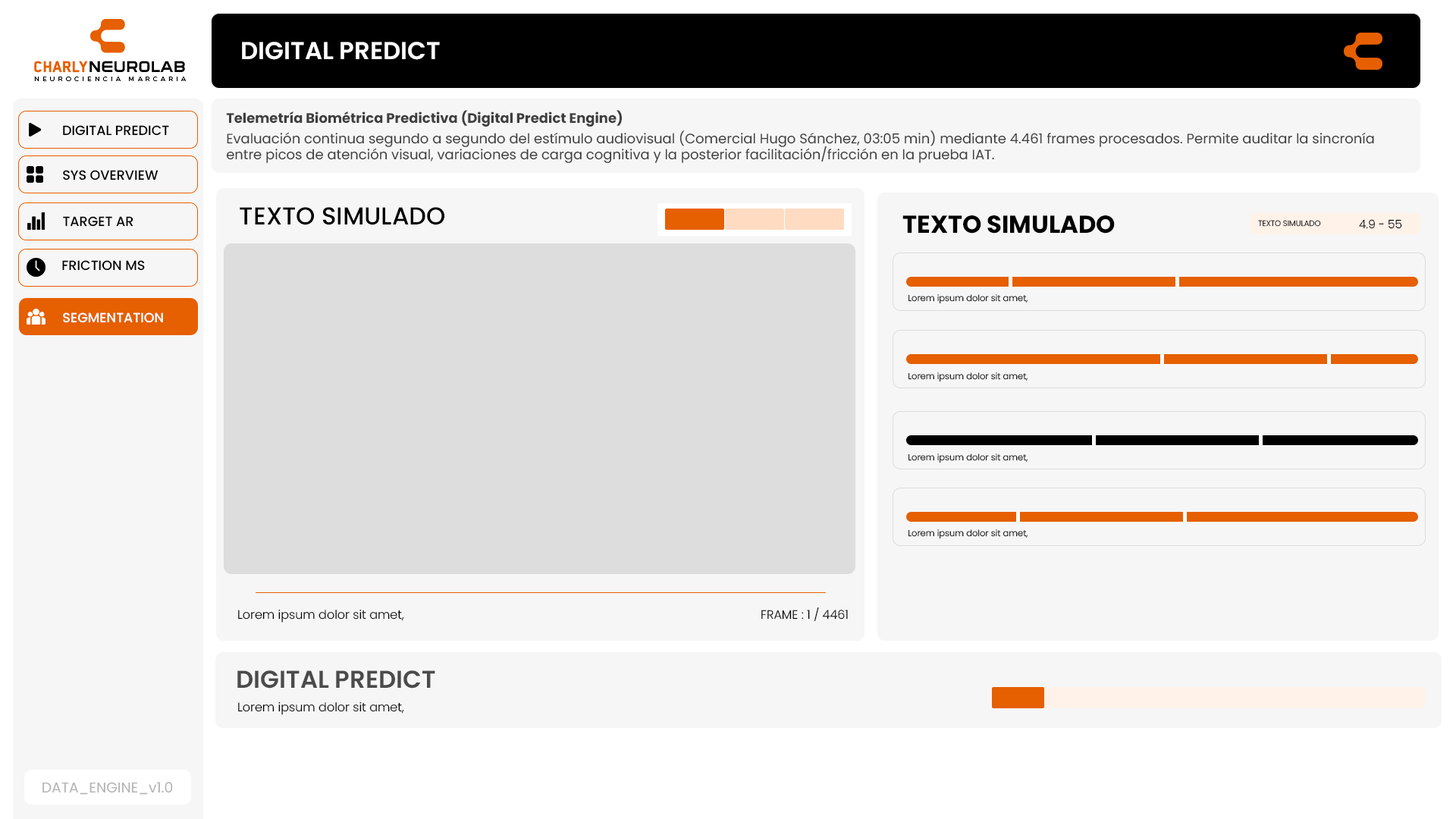
<style>
.page{position:relative;width:1456px;height:819px;background:#f6f6f6}
.page>*{position:absolute;margin:0}
.t1{font:24.5px "Poppins-SemiBold";color:#ffffff}
.t2{font:13.6px "Poppins-Regular";color:#3f3f3f}
.t3{font:13.6px "Poppins-Bold";color:#3f3f3f}
.t4{font:13.3px "Poppins-Medium";color:#000000}
.t5{font:24.5px "Poppins-Medium";color:#000000}
.t6{font:24.5px "Poppins-Bold";color:#000000}
.t7{font:7.7px "Poppins-Light"}
.t8{font:11.6px "Poppins-Light";color:#000000}
.t9{font:8.7px "Poppins-Light";color:#000000}
.t10{font:13.3px "Poppins-Medium";color:#ffffff}
.t11{font:12.1px "Poppins-Light";color:#000000}
.t12{font:24.5px "Poppins-SemiBold";color:#4b4b4b}
.t13{font:14.2px "Poppins-Regular";color:#b4b4b4}
</style>
<div class="page">
<p class="t1" style="left:242px;top:42px;width:198px;height:18px">DIGITAL PREDICT</p>
<p class="t2" style="left:226px;top:110px;width:1148px;height:53px"><span class="t3">Telemetría Biométrica Predictiva (Digital Predict Engine)<br></span>Evaluación continua segundo a segundo del estímulo audiovisual (Comercial Hugo Sánchez, 03:05 min) mediante 4.461 frames procesados. Permite auditar la sincronía entre picos de atención visual, variaciones de carga cognitiva y la posterior facilitación/fricción en la prueba IAT.</p>
<p class="t4" style="left:63px;top:125px;width:106px;height:11px">DIGITAL PREDICT</p>
<p class="t4" style="left:63px;top:170px;width:95px;height:10px">SYS OVERVIEW</p>
<p class="t5" style="left:240px;top:207px;width:204px;height:18px">TEXTO SIMULADO</p>
<p class="t4" style="left:63px;top:216px;width:70px;height:11px">TARGET AR</p>
<p class="t6" style="left:902px;top:215px;width:213px;height:19px">TEXTO SIMULADO</p>
<p class="t7" style="left:1258px;top:220px;width:63px;height:7px">TEXTO SIMULADO</p>
<p class="t8" style="left:1359px;top:219px;width:43px;height:10px">4.9 - 55</p>
<p class="t4" style="left:62px;top:260px;width:83px;height:11px">FRICTION MS</p>
<p class="t9" style="left:908px;top:294px;width:120px;height:10px">Lorem ipsum dolor sit amet,</p>
<p class="t10" style="left:63px;top:312px;width:100px;height:11px">SEGMENTATION</p>
<p class="t9" style="left:908px;top:372px;width:120px;height:10px">Lorem ipsum dolor sit amet,</p>
<p class="t9" style="left:908px;top:453px;width:120px;height:10px">Lorem ipsum dolor sit amet,</p>
<p class="t9" style="left:908px;top:529px;width:120px;height:10px">Lorem ipsum dolor sit amet,</p>
<p class="t11" style="left:238px;top:609px;width:166px;height:14px">Lorem ipsum dolor sit amet,</p>
<p class="t11" style="left:761px;top:607px;width:87px;height:14px">FRAME : 1 / 4461</p>
<p class="t12" style="left:237px;top:670px;width:198px;height:19px">DIGITAL PREDICT</p>
<p class="t11" style="left:238px;top:701px;width:166px;height:14px">Lorem ipsum dolor sit amet,</p>
<p class="t13" style="left:42px;top:782px;width:131px;height:13px">DATA_ENGINE_v1.0</p>
</div>
